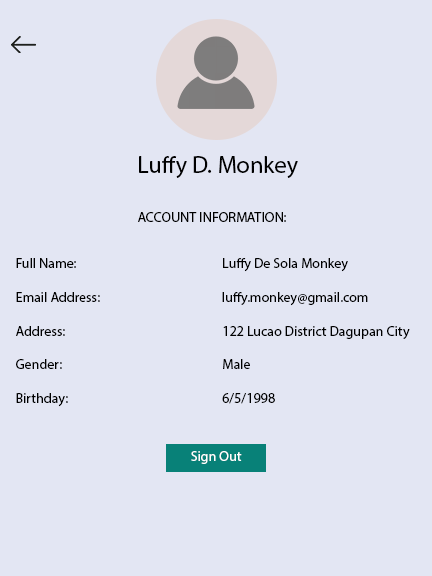
<style>
.page{position:relative;width:432px;height:576px;background:#e3e6f3}
.page>*{position:absolute;margin:0}
.t1{font:24px "MyriadPro-Regular";color:#000000}
.t2{font:14px "MyriadPro-Regular";color:#000000}
.t3{font:14px "MyriadPro-Regular";color:#ffffff}
</style>
<div class="page">
<p class="t1" style="left:139px;top:156px;width:159px;height:22px">Luffy D. Monkey</p>
<p class="t2" style="left:138px;top:212px;width:148px;height:10px">ACCOUNT INFORMATION:</p>
<p class="t2" style="left:16px;top:258px;width:394px;height:149px">Full Name:                                                 Luffy De Sola Monkey<br><br>Email Address:                                         luffy.monkey@gmail.com<br><br>Address:                                                     122 Lucao District Dagupan City<br><br>Gender:                                                      Male<br><br>Birthday:                                                    6/5/1998</p>
<p class="t3" style="left:191px;top:451px;width:51px;height:13px">Sign Out</p>
</div>
